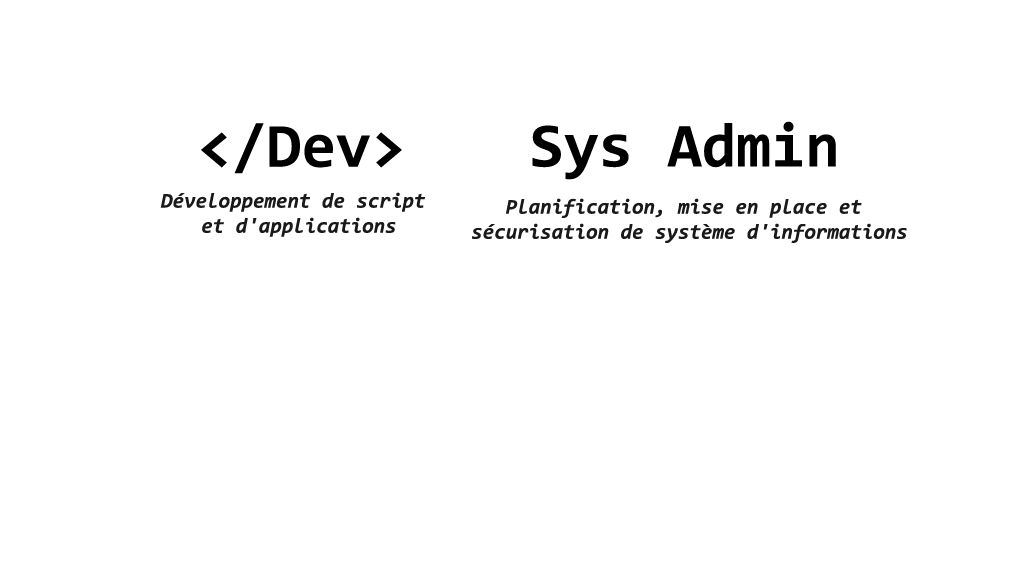
<style>
.page{position:relative;width:1024px;height:576px;background:#ffffff}
.page>*{position:absolute;margin:0}
.t1{font:62.7px "Consolas-Bold";color:#000000}
.t2{font:20.9px "Consolas-BoldItalic";color:#191919}
</style>
<div class="page">
<p class="t1" style="left:201px;top:123px;width:201px;height:51px">&lt;/Dev&gt;</p>
<p class="t1" style="left:532px;top:121px;width:304px;height:59px">Sys Admin</p>
<p class="t2" style="left:160px;top:192px;width:265px;height:45px;text-align:center">Développement de script <br>et d'applications</p>
<p class="t2" style="left:472px;top:198px;width:435px;height:45px;text-align:center">Planification, mise en place et <br>sécurisation de système d'informations</p>
</div>
